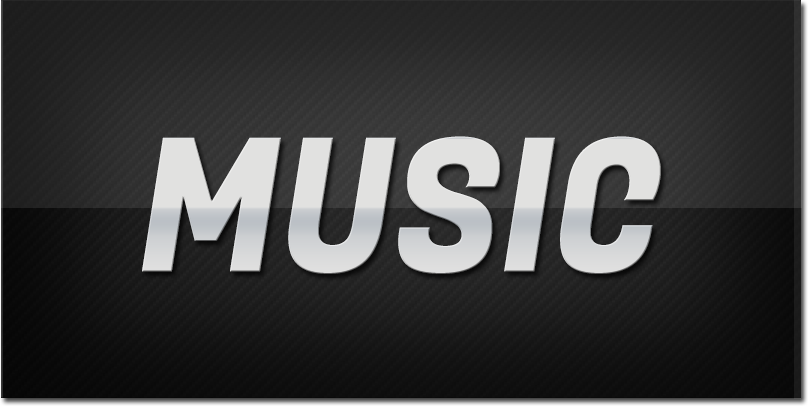
<style>
.page{position:relative;width:808px;height:406px}
.page>*{position:absolute;margin:0}
.t1{font:185.2px "FugazOne-Regular";color:#dfdfdf;scale:0.89 1}
</style>
<div class="page">
<p class="t1" style="left:142px;top:136px;width:519px;height:138px">MUSIC</p>
</div>
